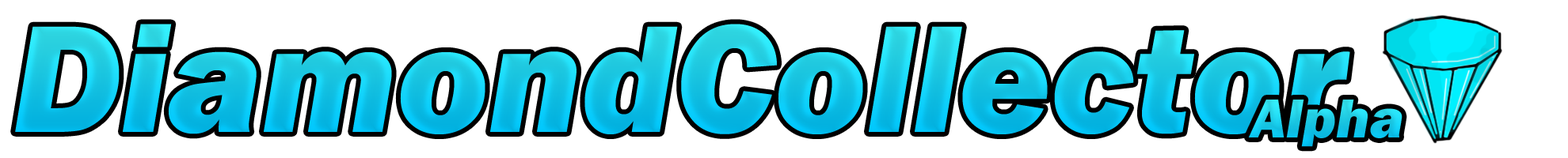
<style>
.page{position:relative;width:1568px;height:158px;background:#ffffff}
.page>*{position:absolute;margin:0}
.t1{font:158.4px "FranklinGothic-HeavyItalic"}
.t2{font:57px "FranklinGothic-HeavyItalic";color:#19c9e8}
</style>
<div class="page">
<p class="t1" style="left:15px;top:24px;width:1335px;height:111px">DiamondCollector</p>
<p class="t2" style="left:1248px;top:100px;width:154px;height:47px">Alpha</p>
</div>
